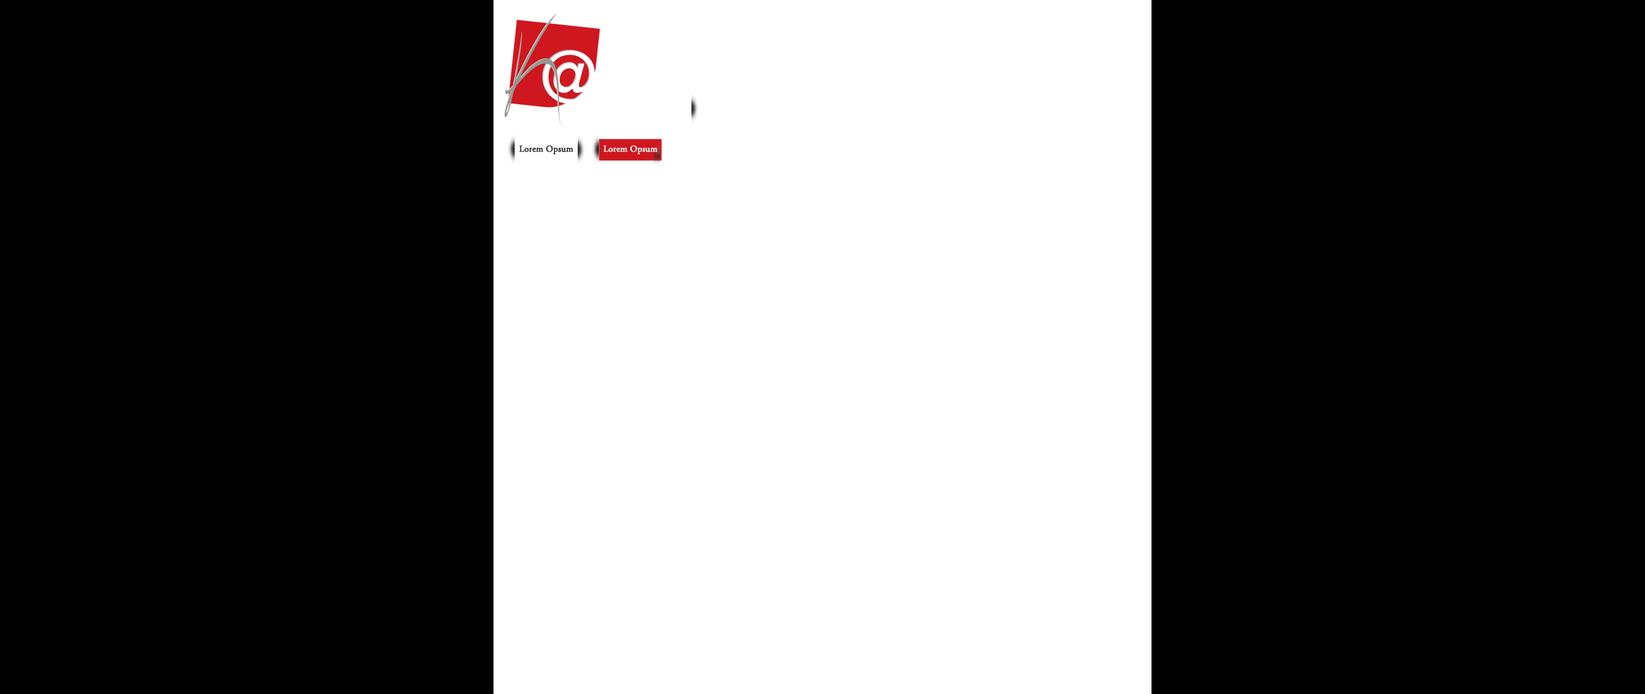
<style>
.page{position:relative;width:1645px;height:694px;background:#000000}
.page>*{position:absolute;margin:0}
.t1{font:9px "AGaramondPro-Regular";color:#303030;font-weight:bold}
.t2{font:9px "AGaramondPro-Regular";color:#ffffff;font-weight:bold}
</style>
<div class="page">
<p class="t1" style="left:519px;top:145px;width:54px;height:9px">Lorem Opsum</p>
<p class="t2" style="left:603px;top:145px;width:54px;height:9px">Lorem Opsum</p>
</div>
